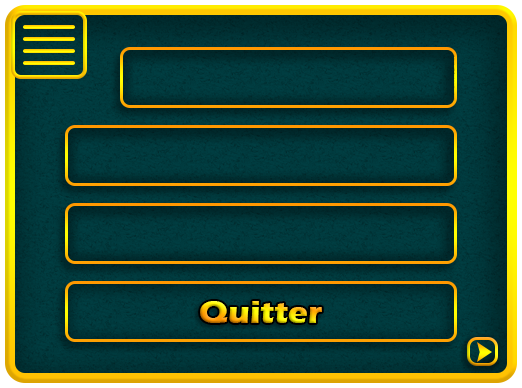
<style>
.page{position:relative;width:522px;height:388px}
.page>*{position:absolute;margin:0}
.t1{font:33px "ErasITC-Bold"}
</style>
<div class="page">
<p class="t1" style="left:200px;top:301px;width:122px;height:22px">Quitter</p>
</div>
